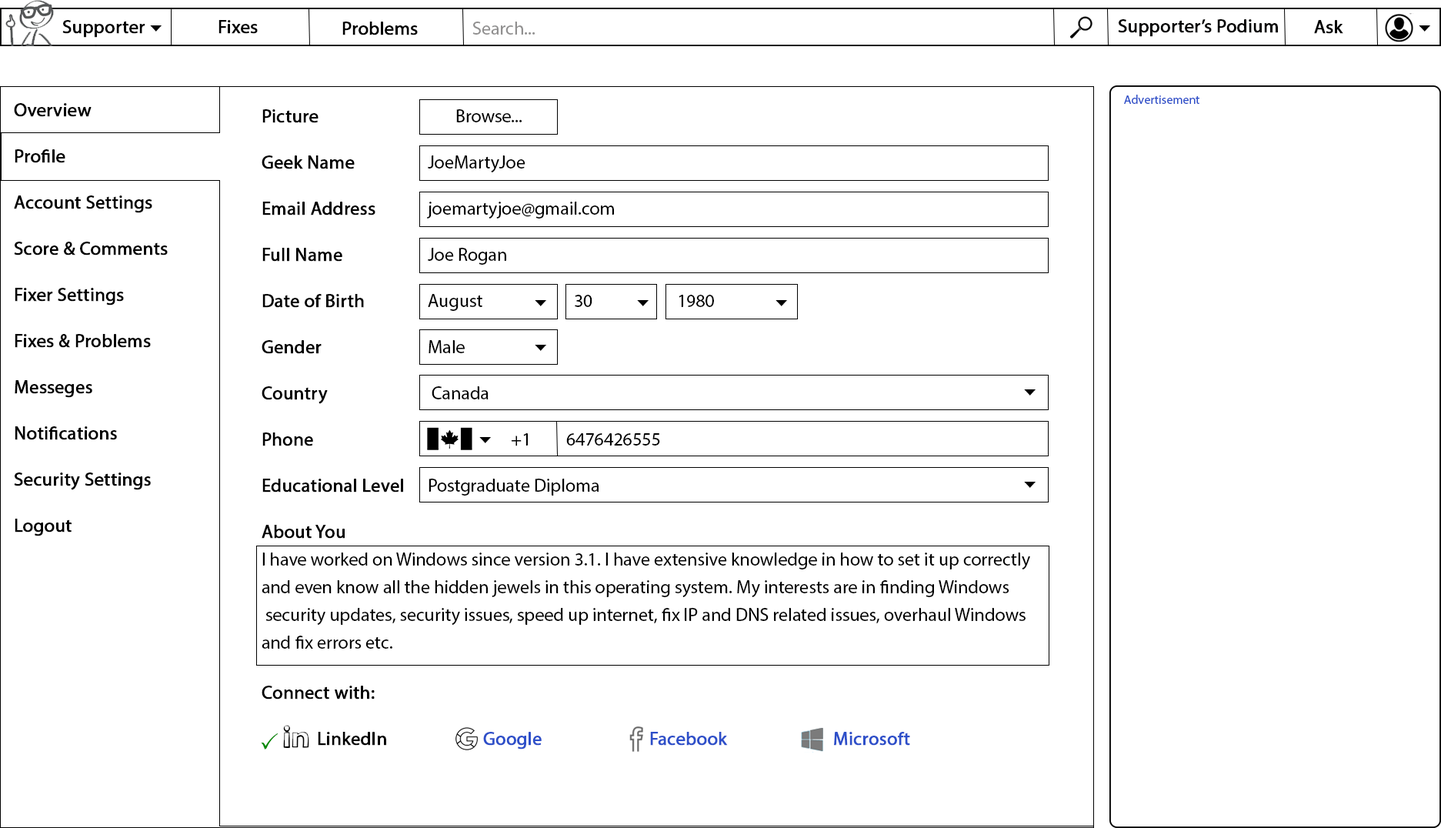
<style>
.page{position:relative;width:1441px;height:828px;background:#ffffff}
.page>*{position:absolute;margin:0}
.t1{font:18.5px "MyriadPro-Regular";color:#000000;font-weight:bold}
.t2{font:18.5px "MyriadPro-Regular";color:#919090}
.t3{font:18.5px "MyriadPro-Regular";color:#010000;font-weight:bold}
.t4{font:12.3px "MyriadPro-Regular";color:#2d4fc9}
.t5{font:18.5px/46.2px "MyriadPro-Regular";color:#000000;font-weight:bold}
.t6{font:18.5px/27.7px "MyriadPro-Regular";color:#000000}
.t7{font:18.5px/46.2px "MyriadPro-Regular";color:#000000}
.t8{font:18.5px/23.1px "MyriadPro-Regular";color:#000000;font-weight:bold}
.t9{font:18.5px/23.1px "MyriadPro-Regular";color:#2d4fc9;font-weight:bold}
</style>
<div class="page">
<p class="t1" style="left:62px;top:20px;width:83px;height:18px">Supporter</p>
<p class="t1" style="left:218px;top:20px;width:40px;height:14px">Fixes</p>
<p class="t1" style="left:342px;top:22px;width:76px;height:13px">Problems</p>
<p class="t2" style="left:472px;top:22px;width:63px;height:13px">Search...</p>
<p class="t3" style="left:1118px;top:19px;width:160px;height:18px">Supporter’s Podium</p>
<p class="t1" style="left:1314px;top:20px;width:29px;height:14px">Ask</p>
<p class="t4" style="left:1124px;top:95px;width:75px;height:9px">Advertisement</p>
<p class="t5" style="left:14px;top:103px;width:154px;height:433px">Overview<br>Profile<br>Account Settings<br>Score &amp; Comments<br>Fixer Settings<br>Fixes &amp; Problems<br>Messeges<br>Notifications<br>Security Settings<br>Logout</p>
<p class="t6" style="left:262px;top:109px;width:768px;height:640px"><span class="t5">Picture</span><span class="t7">      Browse...<br></span><span class="t5">Geek Name</span><span class="t7">   JoeMartyJoe<br></span><span class="t5">Email Address</span><span class="t7">  joemartyjoe@gmail.com<br></span><span class="t5">Full Name </span><span class="t7">   Joe Rogan<br></span><span class="t5">Date of Birth</span><span class="t7">   August      30    1980<br></span><span class="t5">Gender</span><span class="t7">    Male<br></span><span class="t5">Country</span><span class="t7">     Canada<br></span><span class="t5">Phone</span><span class="t7">        +1  6476426555<br></span><span class="t5">Educational Level</span><span class="t7"> Postgraduate Diploma<br></span><span class="t5">About You<br></span>I have worked on Windows since version 3.1. I have extensive knowledge in how to set it up correctly <br>and even know all the hidden jewels in this operating system. My interests are in finding Windows<br> security updates, security issues, speed up internet, fix IP and DNS related issues, overhaul Windows <br>and fix errors etc.<br><br><span class="t1">Connect with:<br><br>  </span><span class="t8">LinkedIn  </span><span class="t9">  Google    Facebook        Microsoft</span></p>
</div>
